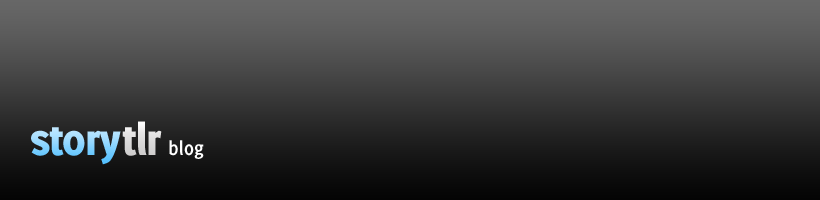
<style>
.page{position:relative;width:820px;height:200px}
.page>*{position:absolute;margin:0}
.t1{font:48.1px "Delicious-Heavy";letter-spacing:-0.025em;color:#dedddd}
.t2{font:48.1px "Delicious-Heavy";letter-spacing:-0.025em}
.t3{font:21.2px "Delicious-Bold";color:#ffffff}
</style>
<div class="page">
<p class="t1" style="left:122px;top:121px;width:40px;height:35px">tlr</p>
<p class="t2" style="left:31px;top:127px;width:90px;height:38px">story</p>
<p class="t3" style="left:169px;top:140px;width:35px;height:19px">blog</p>
</div>
